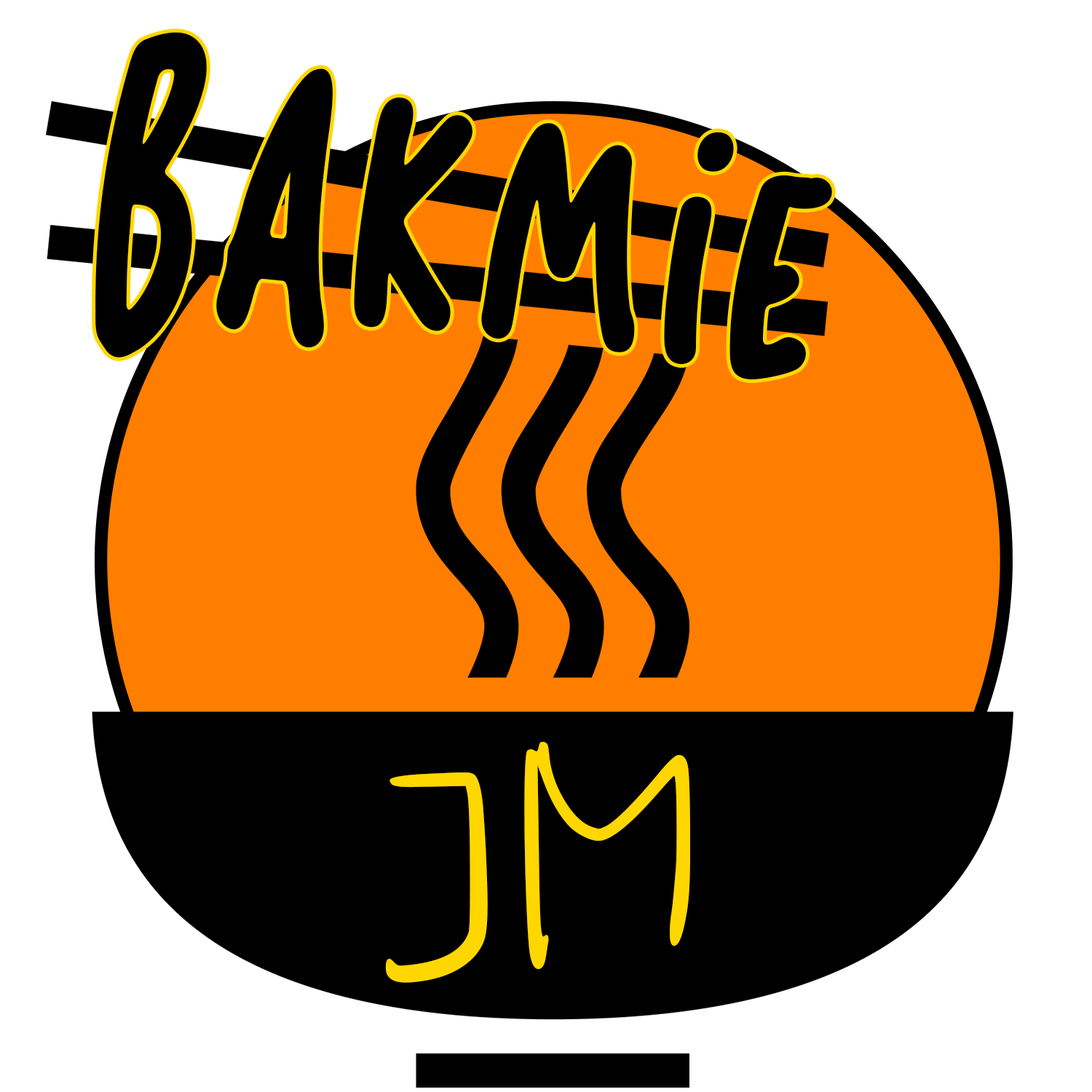
<style>
.page{position:relative;width:1092px;height:1092px;background:#ffffff}
.page>*{position:absolute;margin:0}
.t1{font:205.3px "BaksoSapi";color:#000000}
.t2{font:363.4px "Vianhand-Regular";color:#ffd700}
</style>
<div class="page">
<p class="t1" style="left:95px;top:32px;width:737px;height:348px;rotate:8deg">Bakmie</p>
<p class="t2" style="left:385px;top:742px;width:305px;height:241px">JM</p>
</div>
